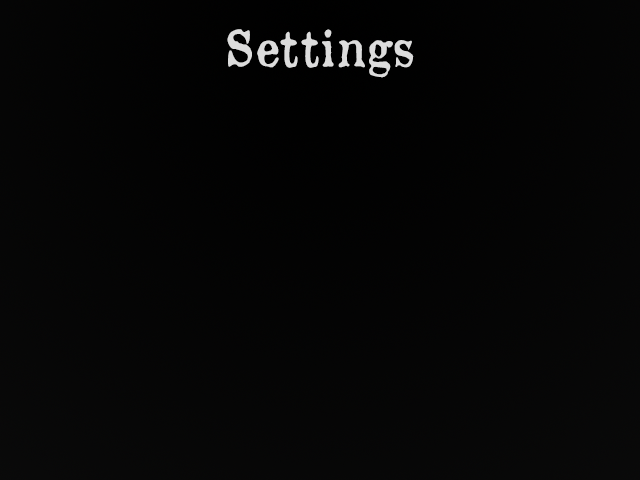
<style>
.page{position:relative;width:640px;height:480px}
.page>*{position:absolute;margin:0}
.t1{font:48px "OldNewspaperTypes";color:#dcdcdc}
</style>
<div class="page">
<p class="t1" style="left:227px;top:29px;width:187px;height:49px">Settings</p>
</div>
